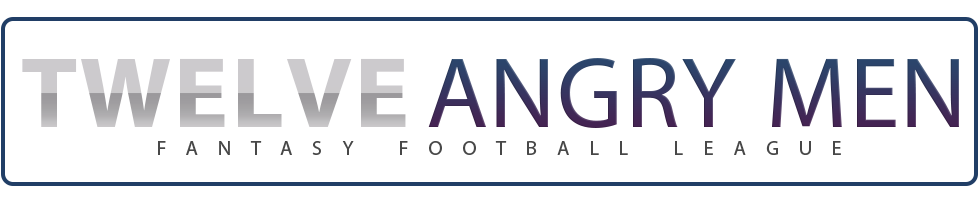
<style>
.page{position:relative;width:980px;height:200px;background:#ffffff}
.page>*{position:absolute;margin:0}
.t1{font:142px "MyriadArabic-Bold";letter-spacing:0.015em}
.t2{font:142px "MyriadArabic-Regular";letter-spacing:0.011em;color:#383560}
.t3{font:28px "MyriadArabic-Regular";letter-spacing:0.72em;color:#484848}
</style>
<div class="page">
<p class="t1" style="left:22px;top:58px;width:384px;height:69px">TWELVE</p>
<p class="t2" style="left:428px;top:58px;width:531px;height:70px">ANGRY MEN</p>
<p class="t3" style="left:158px;top:141px;width:683px;height:14px">FANTASY FOOTBALL LEAGUE</p>
</div>
